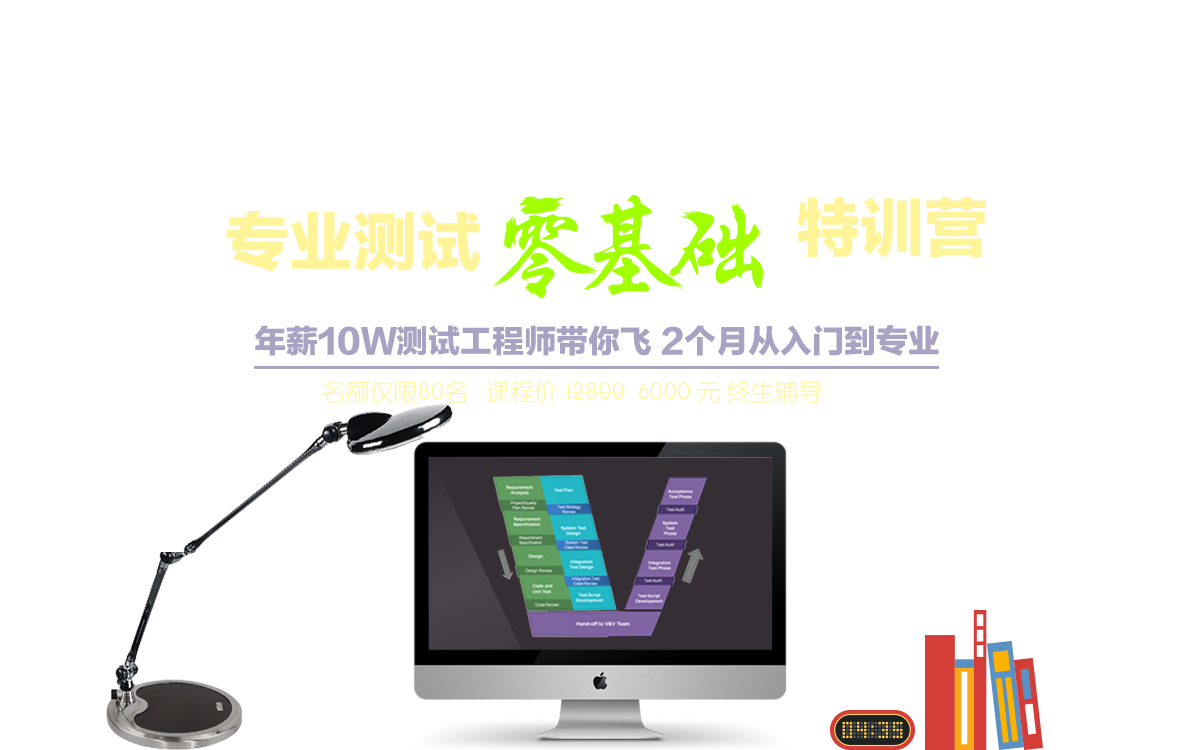
<style>
.page{position:relative;width:1200px;height:750px;background:#ffffff}
.page>*{position:absolute;margin:0}
.t1{font:64px "FZLTTHK--GBK1-0";color:#fff497}
.t2{font:32px "FZLTTHK--GBK1-0";color:#a9a2c2}
.t3{font:24px "STYuanti-SC-Light";color:#fff497}
</style>
<div class="page">
<p class="t1" style="left:797px;top:197px;width:189px;height:61px">特训营</p>
<p class="t1" style="left:226px;top:211px;width:254px;height:61px">专业测试</p>
<p class="t2" style="left:254px;top:325px;width:685px;height:31px">年薪10W测试工程师带你飞 2个月从入门到专业</p>
<p class="t3" style="left:322px;top:380px;width:500px;height:24px">名额仅限80名   课程价 12800  6000 元 终生辅导</p>
</div>
